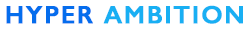
<style>
.page{position:relative;width:250px;height:30px;background:#ffffff}
.page>*{position:absolute;margin:0}
.t1{font:25px "GillSans-SemiBold";letter-spacing:0.05em;color:#18aff3;font-weight:bold}
.t2{font:25px "GillSans-SemiBold";letter-spacing:0.05em;color:#056ded;font-weight:bold}
</style>
<div class="page">
<p class="t1" style="left:6px;top:5px;width:237px;height:19px"><span class="t2">HYPER </span>AMBITION</p>
</div>
